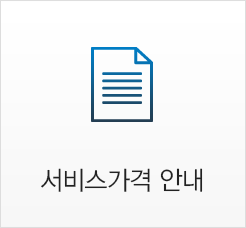
<style>
.page{position:relative;width:246px;height:228px}
.page>*{position:absolute;margin:0}
.t1{font:26px "YDVYGO32";letter-spacing:-0.025em;color:#222222;scale:0.95 1}
</style>
<div class="page">
<p class="t1" style="left:41px;top:168px;width:162px;height:24px">서비스가격 안내</p>
</div>
